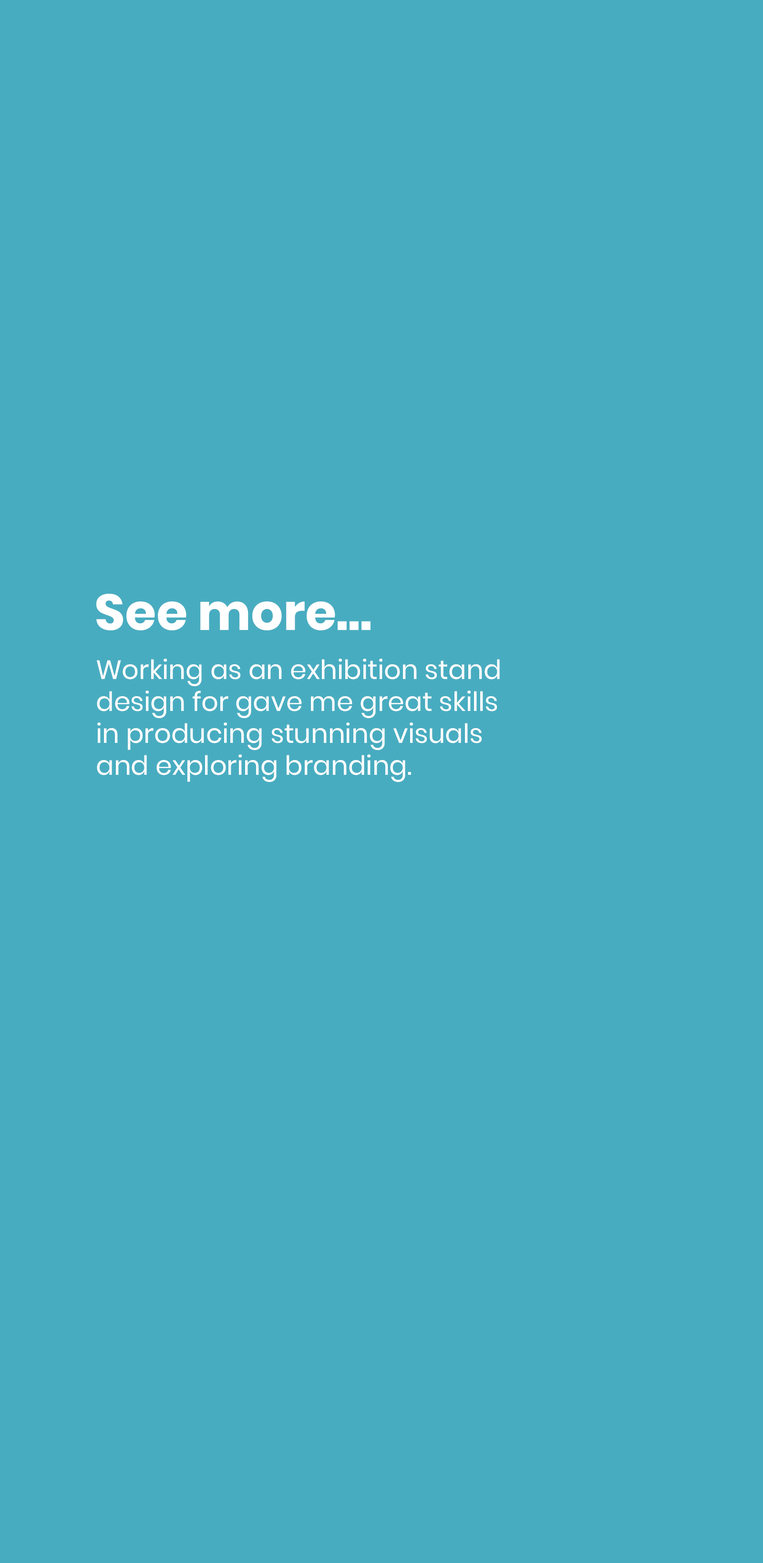
<style>
.page{position:relative;width:763px;height:1563px;background:#48acc0}
.page>*{position:absolute;margin:0}
.t1{font:50.4px "Poppins-Bold";color:#ffffff}
.t2{font:26.6px "Poppins-Regular";color:#ffffff}
</style>
<div class="page">
<p class="t1" style="left:96px;top:594px;width:274px;height:37px">See more...</p>
<p class="t2" style="left:97px;top:659px;width:403px;height:123px">Working as an exhibition stand<br>design for gave me great skills<br>in producing stunning visuals<br>and exploring branding.</p>
</div>
